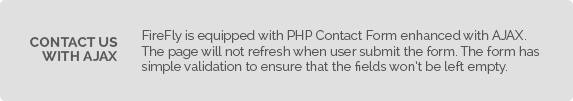
<style>
.page{position:relative;width:573px;height:101px;background:#e0e0e0}
.page>*{position:absolute;margin:0}
.t1{font:13px "Raleway-Regular";color:#585858}
.t2{font:14px "Raleway-Bold";color:#585858}
</style>
<div class="page">
<p class="t1" style="left:141px;top:30px;width:399px;height:44px">FireFly is equipped with PHP Contact Form enhanced with AJAX. The page will not refresh when user submit the form. The form has simple validation to ensure that the fields won’t be left empty.</p>
<p class="t2" style="left:30px;top:37px;width:88px;height:10px">CONTACT US</p>
<p class="t2" style="left:42px;top:51px;width:75px;height:10px">WITH AJAX</p>
</div>
